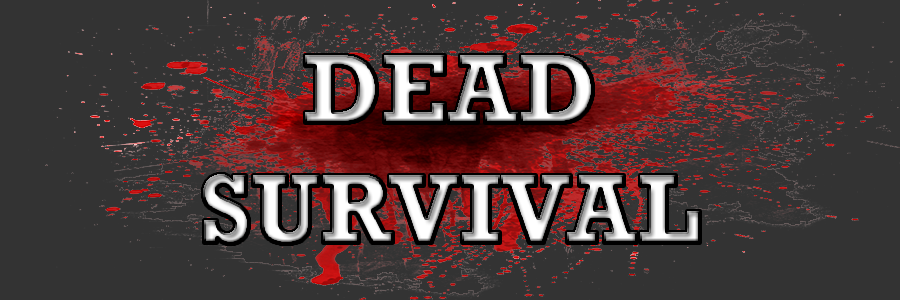
<style>
.page{position:relative;width:900px;height:300px;background:#333333}
.page>*{position:absolute;margin:0}
.t1{font:100px "Rockwell-Bold"}
</style>
<div class="page">
<p class="t1" style="left:203px;top:55px;width:497px;height:189px;text-align:center">DEAD<br>SURVIVAL</p>
</div>
